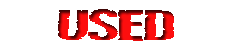
<style>
.page{position:relative;width:240px;height:50px;background:#ffffff}
.page>*{position:absolute;margin:0}
.t1{font:33.3px "VulgarDisplayOfPower"}
</style>
<div class="page">
<p class="t1" style="left:58px;top:9px;width:116px;height:32px">USED VINYL</p>
</div>
